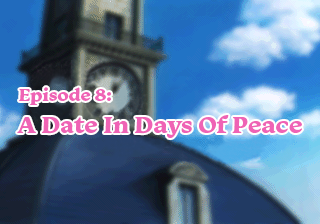
<style>
.page{position:relative;width:320px;height:224px}
.page>*{position:absolute;margin:0}
.t1{font:24px/32px "Monarcha-Bold";color:#ef63b5}
.t2{font:18px/30px "Monarcha-Bold";color:#ef63b5}
</style>
<div class="page">
<p class="t1" style="left:17px;top:87px;width:285px;height:51px"><span class="t2">Episode 8:<br></span>A Date In Days Of Peace</p>
</div>
